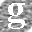
<style>
.page{position:relative;width:32px;height:32px;background:#ffffff}
.page>*{position:absolute;margin:0}
.t1{font:38px "TimesNewRomanPS-BoldMT";color:#ffffff}
</style>
<div class="page">
<p class="t1" style="left:8px;top:3px;width:17px;height:26px">g</p>
</div>
